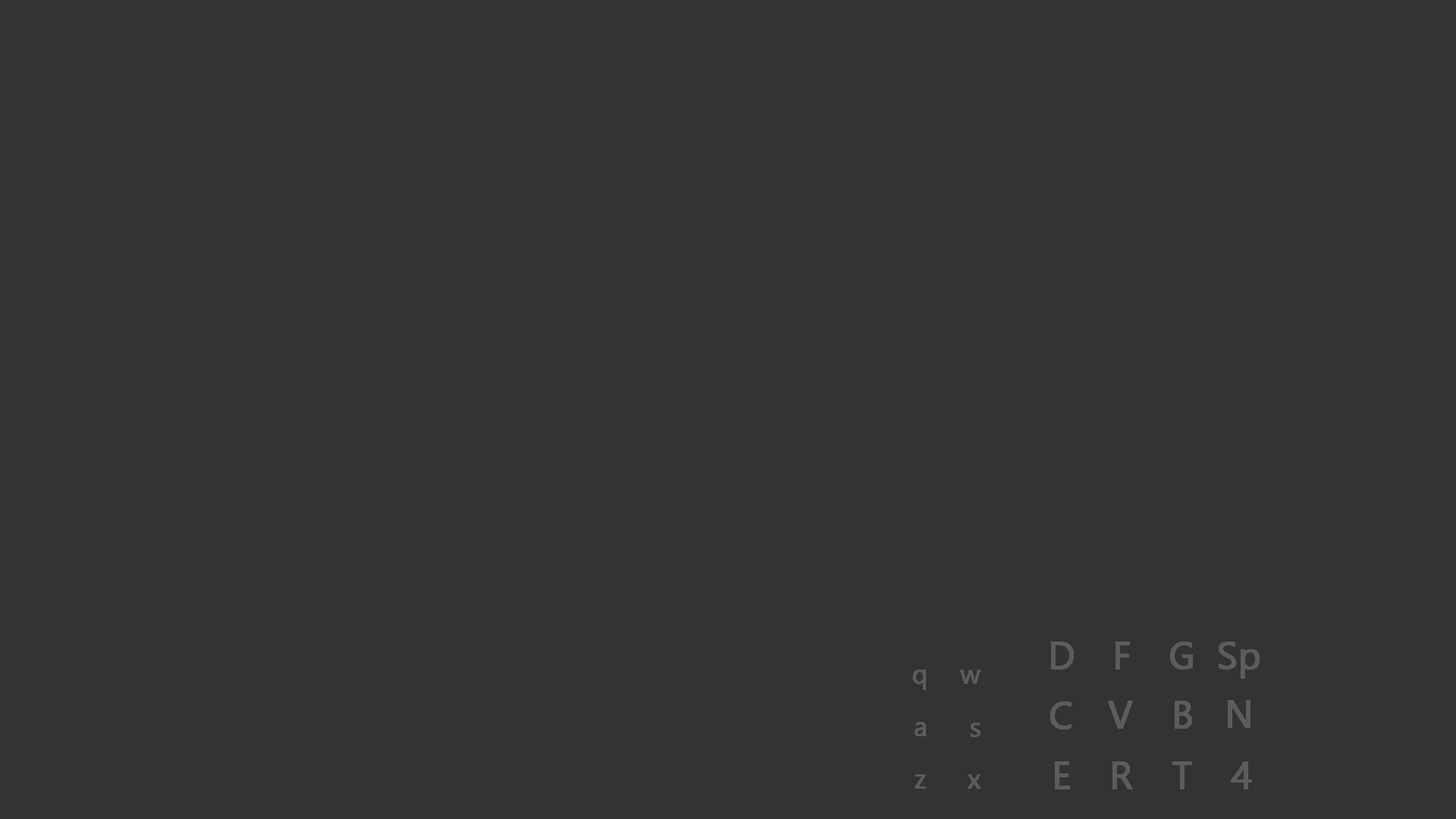
<style>
.page{position:relative;width:1456px;height:819px;background:#333333}
.page>*{position:absolute;margin:0}
.t1{font:37.9px "SegoeUI";color:#5c5c5c;font-weight:bold}
.t2{font:27.3px "SegoeUI";color:#5c5c5c;font-weight:bold}
</style>
<div class="page">
<p class="t1" style="left:1051px;top:642px;width:23px;height:28px">D</p>
<p class="t1" style="left:1115px;top:642px;width:15px;height:28px">F</p>
<p class="t1" style="left:1170px;top:642px;width:23px;height:28px">G</p>
<p class="t1" style="left:1219px;top:642px;width:41px;height:37px">Sp</p>
<p class="t2" style="left:913px;top:670px;width:13px;height:20px">q</p>
<p class="t2" style="left:960px;top:670px;width:21px;height:14px">w</p>
<p class="t1" style="left:1050px;top:701px;width:22px;height:29px">C</p>
<p class="t1" style="left:1108px;top:701px;width:25px;height:28px">V</p>
<p class="t1" style="left:1175px;top:701px;width:17px;height:28px">B</p>
<p class="t1" style="left:1228px;top:700px;width:22px;height:28px">N</p>
<p class="t2" style="left:915px;top:722px;width:11px;height:14px">a</p>
<p class="t2" style="left:971px;top:723px;width:10px;height:14px">s</p>
<p class="t1" style="left:1055px;top:761px;width:15px;height:28px">E</p>
<p class="t1" style="left:1112px;top:761px;width:21px;height:28px">R</p>
<p class="t1" style="left:1172px;top:761px;width:20px;height:28px">T</p>
<p class="t1" style="left:1231px;top:761px;width:21px;height:28px">4</p>
<p class="t2" style="left:915px;top:774px;width:11px;height:15px">z</p>
<p class="t2" style="left:968px;top:774px;width:13px;height:15px">x</p>
</div>
